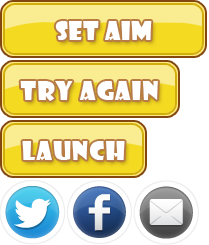
<style>
.page{position:relative;width:209px;height:245px;background:#ffffff}
.page>*{position:absolute;margin:0}
.t1{font:25px "ShowcardGothic-Reg";letter-spacing:0.025em;color:#ffffff}
.t2{font:25px "ShowcardGothic-Reg";letter-spacing:0.05em;color:#ffffff}
</style>
<div class="page">
<p class="t1" style="left:55px;top:21px;width:97px;height:20px">SET AIM</p>
<p class="t2" style="left:20px;top:81px;width:138px;height:20px">t<span class="t1">r</span>y again</p>
<p class="t2" style="left:22px;top:141px;width:103px;height:20px">launch</p>
</div>
